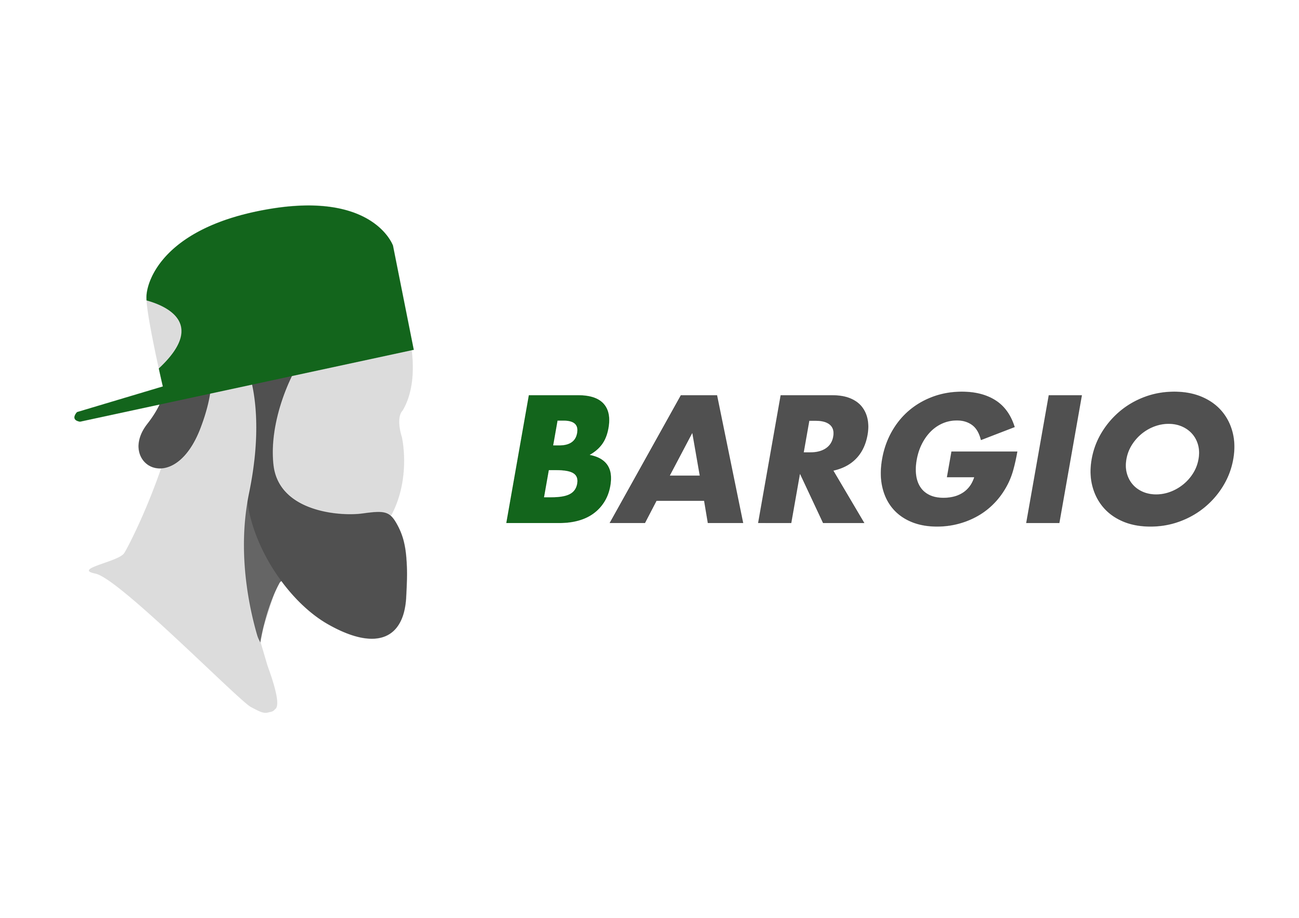
<style>
.page{position:relative;width:1299px;height:918px;background:#ffffff}
.page>*{position:absolute;margin:0}
.t1{font:169.7px "Futura-Bold";color:#505050;font-style:italic}
.t2{font:169.7px "Futura-Bold";color:#13651c;font-style:italic}
</style>
<div class="page">
<p class="t1" style="left:506px;top:392px;width:728px;height:135px"><span class="t2">B</span>ARGIO</p>
</div>
